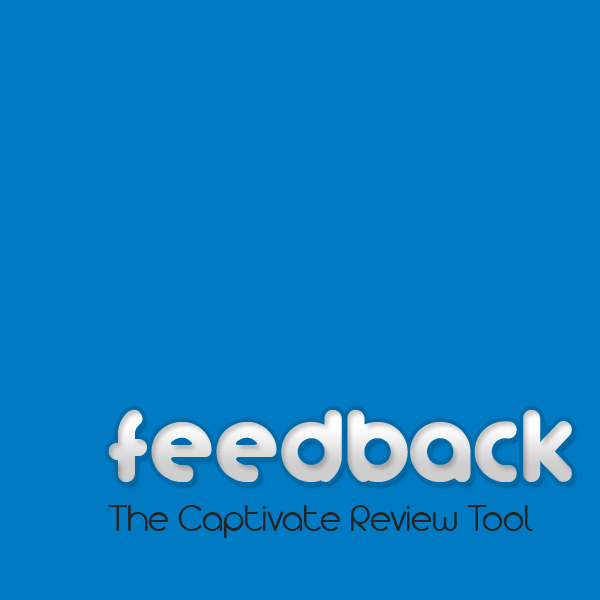
<style>
.page{position:relative;width:600px;height:600px;background:#007ac3}
.page>*{position:absolute;margin:0}
.t1{font:120px "tutano.cc"}
.t2{font:40px "Arista2.0AlternateLight";color:#252525}
</style>
<div class="page">
<p class="t1" style="left:108px;top:409px;width:464px;height:73px">Feedback</p>
<p class="t2" style="left:108px;top:505px;width:425px;height:33px">The Captivate Review Tool</p>
</div>
